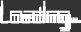
<style>
.page{position:relative;width:81px;height:32px;background:#333333}
.page>*{position:absolute;margin:0}
.t1{font:27.1px "FZZHYFW--GB1-0";color:#ffffff}
.t2{font:37.5px "FZZHYFW--GB1-0";color:#ffffff}
.t3{font:50px "FZZHYFW--GB1-0";color:#ffffff}
</style>
<div class="page">
<p class="t1" style="left:0px;top:6px;width:77px;height:24px">Loading...</p>
<p class="t1" style="left:0px;top:0px;width:80px;height:30px"><span class="t2">L</span>oading...</p>
<p class="t1" style="left:0px;top:6px;width:81px;height:24px">L<span class="t2">o</span>ading...</p>
<p class="t1" style="left:0px;top:6px;width:81px;height:24px">Lo<span class="t2">a</span>ding...</p>
<p class="t1" style="left:0px;top:0px;width:81px;height:30px">Loa<span class="t2">d</span>ing...</p>
<p class="t1" style="left:0px;top:6px;width:78px;height:24px">Load<span class="t2">i</span>ng...</p>
<p class="t1" style="left:0px;top:6px;width:81px;height:24px">Loadi<span class="t2">n</span>g...</p>
<p class="t1" style="left:0px;top:6px;width:81px;height:26px">Loadin<span class="t2">g</span>...</p>
<p class="t1" style="left:0px;top:6px;width:79px;height:24px">Loading<span class="t3">.</span>..</p>
<p class="t1" style="left:0px;top:6px;width:79px;height:24px">Loading.<span class="t3">.</span>.</p>
<p class="t1" style="left:0px;top:6px;width:78px;height:24px">Loading..<span class="t3">.</span></p>
</div>
